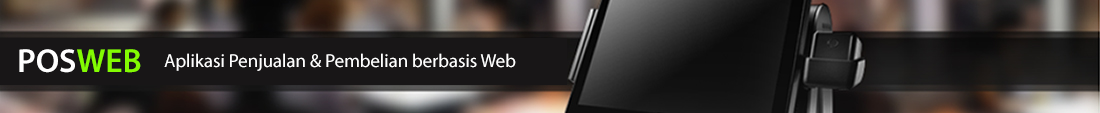
<style>
.page{position:relative;width:1100px;height:113px}
.page>*{position:absolute;margin:0}
.t1{font:33.3px "MyriadPro-Semibold";color:#ffffff}
.t2{font:33.3px "MyriadPro-Semibold";color:#83fb02}
.t3{font:18.8px "MyriadPro-Regular";color:#ffffff}
</style>
<div class="page">
<p class="t1" style="left:19px;top:49px;width:122px;height:24px">POS<span class="t2">WEB</span></p>
<p class="t3" style="left:164px;top:53px;width:352px;height:18px">Aplikasi Penjualan &amp; Pembelian berbasis Web</p>
</div>
